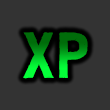
<style>
.page{position:relative;width:110px;height:110px;background:#333333}
.page>*{position:absolute;margin:0}
.t1{font:65.1px "Blackisnotacolor"}
</style>
<div class="page">
<p class="t1" style="left:23px;top:32px;width:65px;height:47px">XP</p>
</div>
